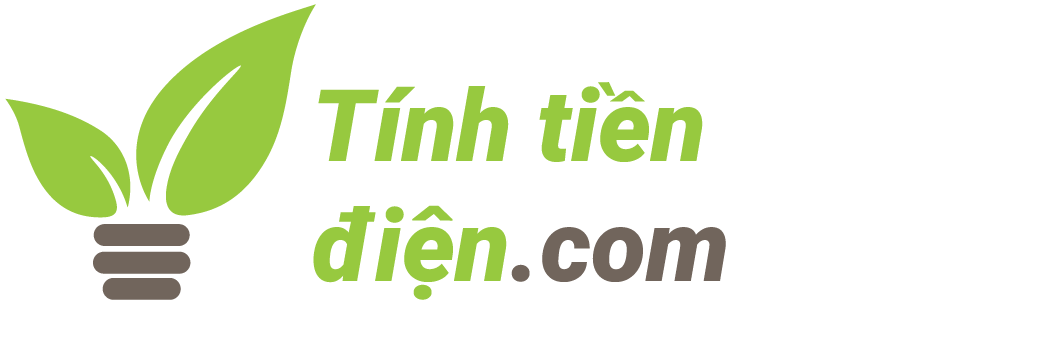
<style>
.page{position:relative;width:1064px;height:339px;background:#ffffff}
.page>*{position:absolute;margin:0}
.t1{font:100px/120px "Roboto-BlackItalic";color:#97c93f}
.t2{font:100px/120px "Roboto-BlackItalic";color:#71655c}
</style>
<div class="page">
<p class="t1" style="left:313px;top:82px;width:413px;height:218px">Tính tiền <br>điện<span class="t2">.com</span></p>
</div>
